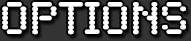
<style>
.page{position:relative;width:191px;height:41px;background:#ffffff}
.page>*{position:absolute;margin:0}
.t1{font:48px "SynchroLET";color:#ffffff}
</style>
<div class="page">
<p class="t1" style="left:2px;top:2px;width:184px;height:33px">OPTIONS</p>
</div>
